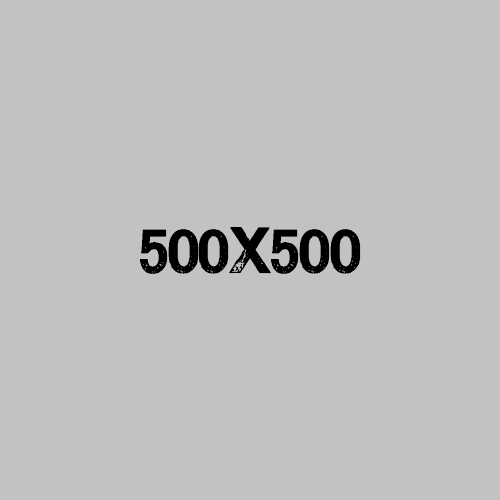
<style>
.page{position:relative;width:500px;height:500px;background:#c2c2c2}
.page>*{position:absolute;margin:0}
.t1{font:60px "TheLastCall-Regular";color:#000000}
</style>
<div class="page">
<p class="t1" style="left:140px;top:227px;width:221px;height:47px">500x500</p>
</div>
